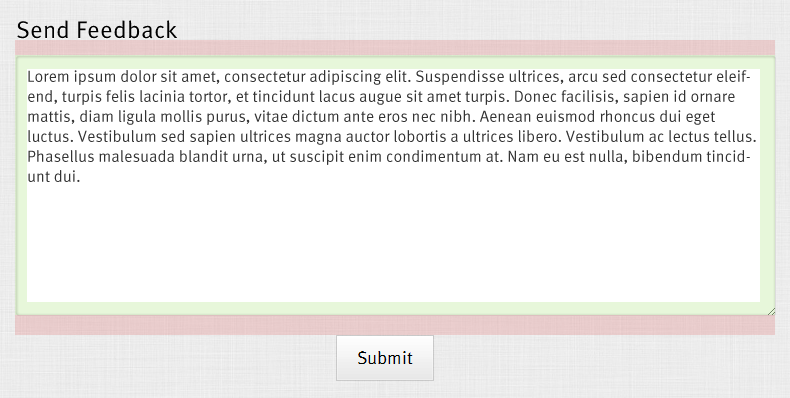
<style>
.page{position:relative;width:790px;height:398px;background:#ffffff}
.page>*{position:absolute;margin:0}
.t1{font:16px/20px "MetaPro-Normal";color:#333333}
</style>
<div class="page">
<p class="t1" style="left:28px;top:70px;width:728px;height:112px">Lorem ipsum dolor sit amet, consectetur adipiscing elit. Suspendisse ultrices, arcu sed consectetur eleifend, turpis felis lacinia tortor, et tincidunt lacus augue sit amet turpis. Donec facilisis, sapien id ornare mattis, diam ligula mollis purus, vitae dictum ante eros nec nibh. Aenean euismod rhoncus dui eget luctus. Vestibulum sed sapien ultrices magna auctor lobortis a ultrices libero. Vestibulum ac lectus tellus. Phasellus malesuada blandit urna, ut suscipit enim condimentum at. Nam eu est nulla, bibendum tincidunt dui.</p>
</div>
